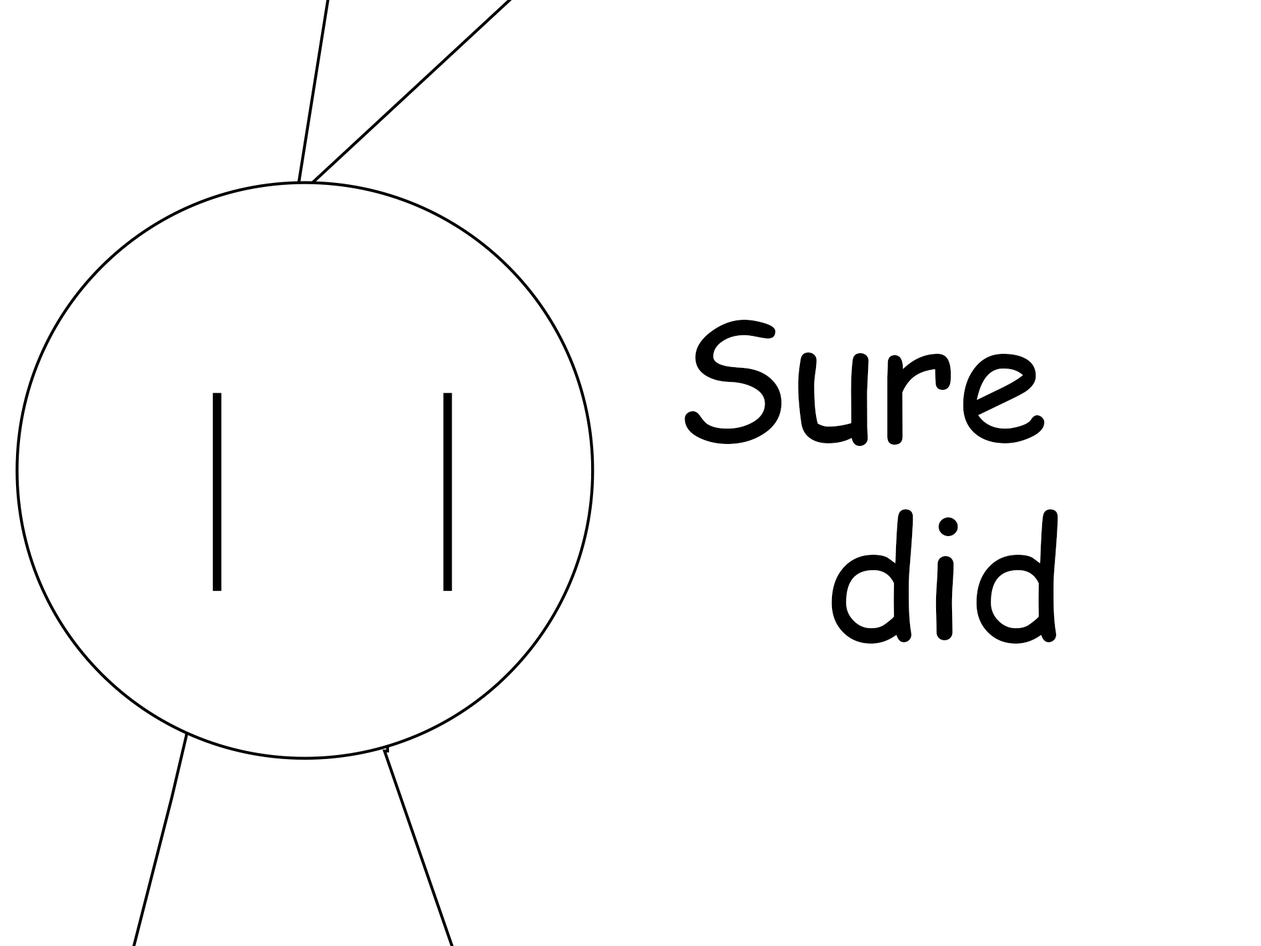
<style>
.page{position:relative;width:1261px;height:946px;background:#ffffff}
.page>*{position:absolute;margin:0}
.t1{font:166.8px "ComicSansMS";color:#000000}
</style>
<div class="page">
<p class="t1" style="left:685px;top:320px;width:373px;height:323px">Sure <br>   did</p>
</div>
